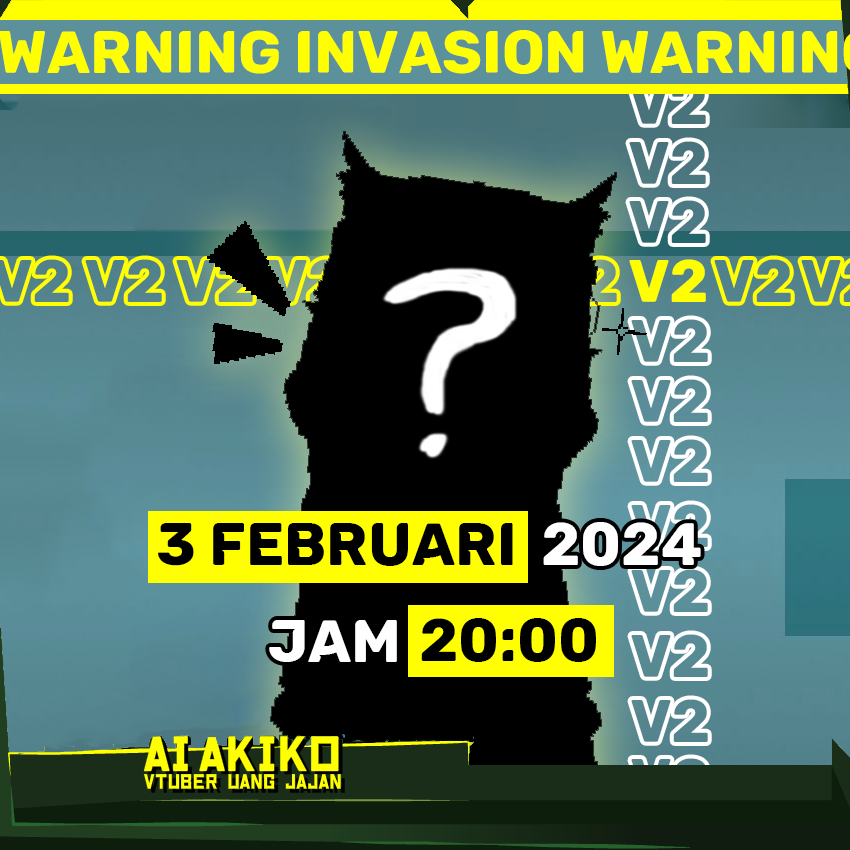
<style>
.page{position:relative;width:850px;height:850px}
.page>*{position:absolute;margin:0}
.t1{font:60px "Cunia"}
.t2{font:60px "Cunia";color:#4b767f}
.t3{font:60px "Cunia";color:#52828b}
.t4{font:60px "Cunia";color:#ffff01}
.t5{font:60px "Cunia";color:#578891}
.t6{font:60px "Cunia";color:#5a8d99}
.t7{font:60px "Cunia";color:#5e939e}
.t8{font:60px "Cunia";color:#000000}
.t9{font:60px "Cunia";color:#ffffff}
.t10{font:60px "Cunia";color:#5c919c}
.t11{font:60px "Cunia";color:#588a94}
.t12{font:60px "Cunia";color:#54848e}
</style>
<div class="page">
<p class="t1" style="left:629px;top:81px;width:77px;height:43px">V2</p>
<p class="t2" style="left:629px;top:141px;width:77px;height:43px">V2</p>
<p class="t1" style="left:629px;top:200px;width:77px;height:43px">V2</p>
<p class="t3" style="left:85px;top:259px;width:77px;height:43px">V2</p>
<p class="t1" style="left:176px;top:259px;width:77px;height:43px">V2</p>
<p class="t1" style="left:540px;top:259px;width:77px;height:43px">V2</p>
<p class="t4" style="left:629px;top:259px;width:77px;height:43px">V2</p>
<p class="t3" style="left:714px;top:259px;width:77px;height:43px">V2</p>
<p class="t5" style="left:631px;top:319px;width:77px;height:43px">V2</p>
<p class="t6" style="left:631px;top:379px;width:77px;height:43px">V2</p>
<p class="t7" style="left:631px;top:439px;width:77px;height:43px">V2</p>
<p class="t8" style="left:158px;top:523px;width:355px;height:43px">3 februari</p>
<p class="t9" style="left:543px;top:522px;width:158px;height:44px">2024</p>
<p class="t10" style="left:631px;top:569px;width:77px;height:43px">V2</p>
<p class="t9" style="left:269px;top:620px;width:128px;height:42px">jam</p>
<p class="t8" style="left:421px;top:618px;width:175px;height:44px">20:00</p>
<p class="t11" style="left:631px;top:634px;width:77px;height:43px">V2</p>
<p class="t12" style="left:631px;top:699px;width:77px;height:43px">V2</p>
</div>
